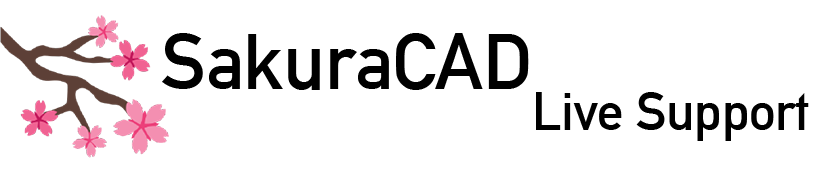
<style>
.page{position:relative;width:817px;height:170px;background:#ffffff}
.page>*{position:absolute;margin:0}
.t1{font:52.5px/40.5px "AlteDIN1451Mittelschrift";color:#000000}
.t2{font:77.5px/57.2px "AlteDIN1451Mittelschrift";color:#000000}
</style>
<div class="page">
<p class="t1" style="left:162px;top:33px;width:647px;height:108px;text-align:right"><span class="t2">SakuraCAD<br></span>Live Support</p>
</div>
